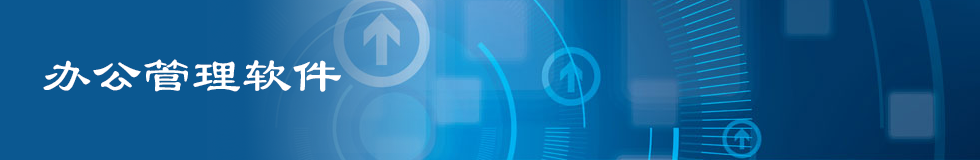
<style>
.page{position:relative;width:980px;height:160px;background:#0b5891}
.page>*{position:absolute;margin:0}
.t1{font:50px "LiSu";color:#ffffff}
</style>
<div class="page">
<p class="t1" style="left:43px;top:59px;width:298px;height:33px">办公管理软件</p>
</div>
